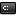
<style>
.page{position:relative;width:16px;height:16px;background:#ffffff}
.page>*{position:absolute;margin:0}
.t1{font:8px "Small Fonts";color:#ffffff}
</style>
<div class="page">
<p class="t1" style="left:3px;top:6px;width:5px;height:4px">c:</p>
</div>
